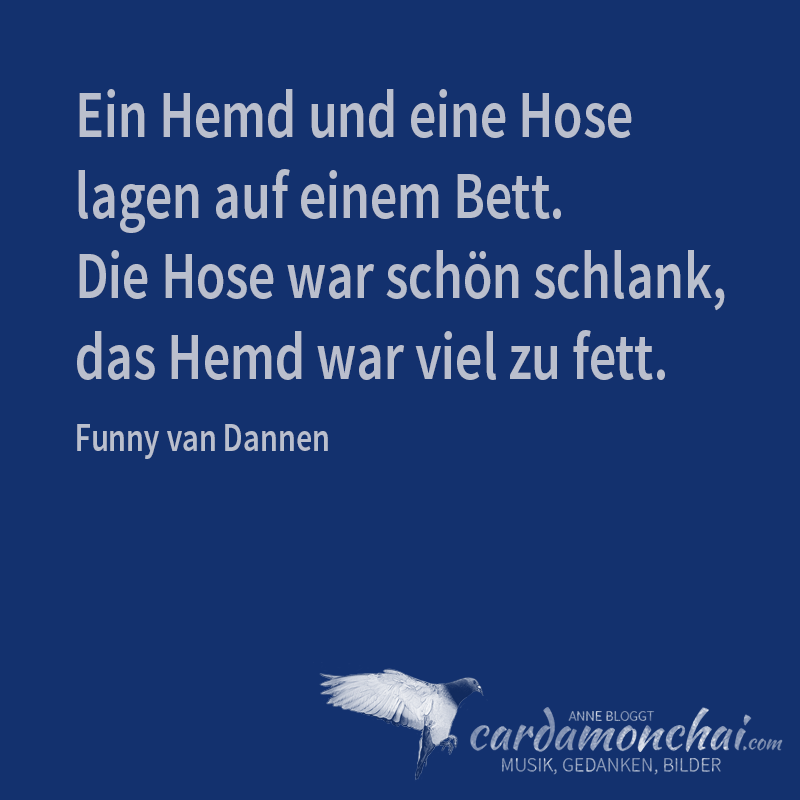
<style>
.page{position:relative;width:800px;height:800px;background:#13316e}
.page>*{position:absolute;margin:0}
.t1{font:67px "SourceSansPro-Semibold";color:#babfcd;scale:0.8 1}
.t2{font:40px "SourceSansPro-Semibold";color:#babfcd;scale:0.8 1}
</style>
<div class="page">
<p class="t1" style="left:77px;top:89px;width:648px;height:370px">Ein Hemd und eine Hose<br>lagen auf einem Bett.<br>Die Hose war schön schlank,<br>das Hemd war viel zu fett.<br><br><span class="t2">Funny van Dannen</span></p>
</div>
